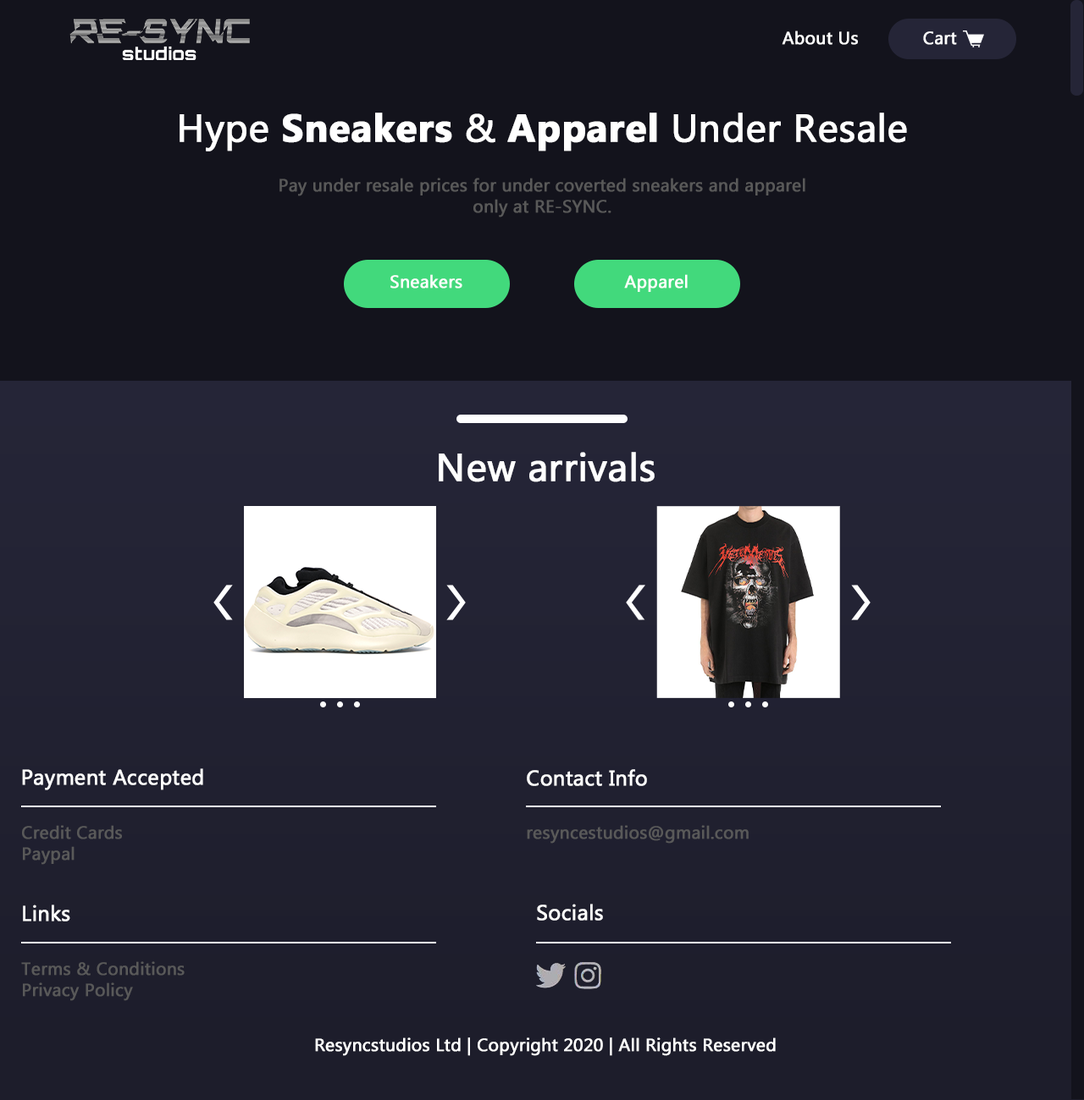
<style>
.page{position:relative;width:1084px;height:1100px;background:#13131c}
.page>*{position:absolute;margin:0}
.t1{font:17.6px "MicrosoftTaiLe";color:#ffffff;font-weight:bold}
.t2{font:38.8px "MicrosoftTaiLe";color:#ffffff;font-weight:bold}
.t3{font:38.8px "MicrosoftTaiLe-Bold";color:#ffffff;font-weight:bold}
.t4{font:17.6px "MicrosoftTaiLe";color:#595959;font-weight:bold}
.t5{font:21.2px "MicrosoftTaiLe";color:#ffffff;font-weight:bold}
</style>
<div class="page">
<p class="t1" style="left:781px;top:30px;width:77px;height:15px">About Us</p>
<p class="t1" style="left:923px;top:31px;width:34px;height:14px">Cart</p>
<p class="t2" style="left:179px;top:113px;width:728px;height:39px">Hype <span class="t3">Sneakers</span> &amp; <span class="t3">Apparel</span> Under Resale</p>
<p class="t4" style="left:279px;top:178px;width:526px;height:40px;text-align:center">Pay under resale prices for under coverted sneakers and apparel only at RE-SYNC.</p>
<p class="t1" style="left:390px;top:274px;width:72px;height:15px">Sneakers</p>
<p class="t1" style="left:624px;top:274px;width:63px;height:18px">Apparel</p>
<p class="t2" style="left:439px;top:452px;width:215px;height:31px">New arrivals</p>
<p class="t5" style="left:22px;top:769px;width:181px;height:22px">Payment Accepted</p>
<p class="t5" style="left:527px;top:769px;width:120px;height:17px">Contact Info</p>
<p class="t4" style="left:22px;top:825px;width:100px;height:40px">Credit Cards<br>Paypal</p>
<p class="t4" style="left:527px;top:825px;width:221px;height:19px">resyncestudios@gmail.com</p>
<p class="t5" style="left:23px;top:905px;width:47px;height:17px">Links</p>
<p class="t5" style="left:537px;top:904px;width:66px;height:17px">Socials</p>
<p class="t4" style="left:21px;top:962px;width:164px;height:39px">Terms &amp; Conditions<br>Privacy Policy</p>
<p class="t1" style="left:315px;top:1038px;width:460px;height:18px">Resyncstudios Ltd | Copyright 2020 | All Rights Reserved</p>
</div>
